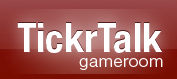
<style>
.page{position:relative;width:177px;height:79px}
.page>*{position:absolute;margin:0}
.t1{font:40px "HelveticaNeueLTPro-BdCn";color:#ffffff}
.t2{font:17px "HelveticaNeueLTPro-Lt";letter-spacing:0.04em;color:#ffffff}
</style>
<div class="page">
<p class="t1" style="left:17px;top:23px;width:145px;height:30px">TickrTalk</p>
<p class="t2" style="left:79px;top:58px;width:84px;height:12px">gameroom</p>
</div>
